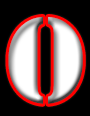
<style>
.page{position:relative;width:90px;height:116px;background:#000000}
.page>*{position:absolute;margin:0}
.t1{font:125px "Stencil"}
</style>
<div class="page">
<p class="t1" style="left:8px;top:17px;width:75px;height:87px">O</p>
</div>
